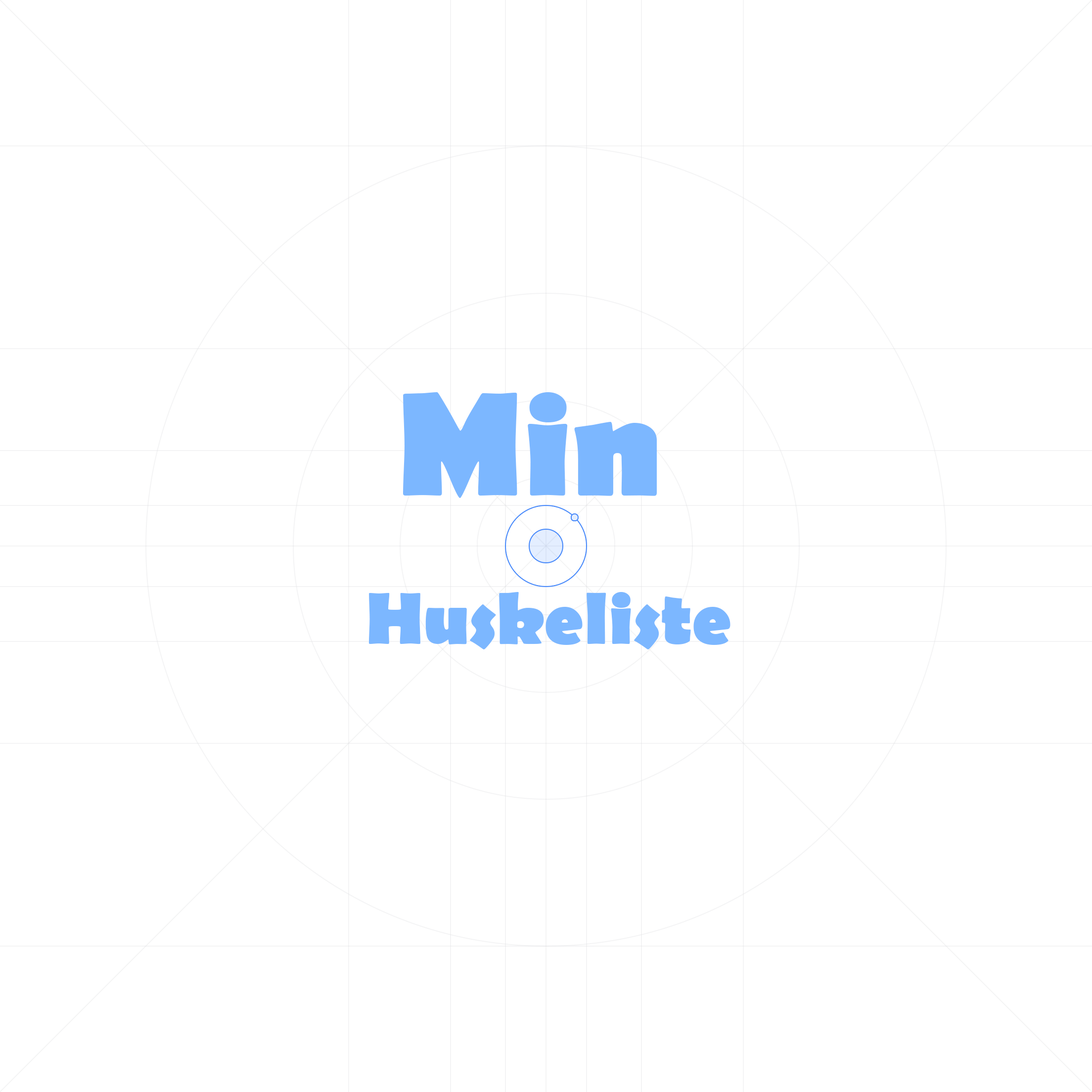
<style>
.page{position:relative;width:1092px;height:1092px;background:#ffffff}
.page>*{position:absolute;margin:0}
.t1{font:148.4px "BerlinSansFB-Bold";color:#7cb7ff}
.t2{font:74.2px "BerlinSansFB-Bold";color:#7cb7ff}
</style>
<div class="page">
<p class="t1" style="left:403px;top:392px;width:254px;height:106px">Min</p>
<p class="t2" style="left:368px;top:592px;width:362px;height:57px">Huskeliste</p>
</div>
